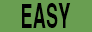
<style>
.page{position:relative;width:92px;height:32px;background:#699e51}
.page>*{position:absolute;margin:0}
.t1{font:34px "Helvetica-Bold";color:#000000;scale:0.54 1}
</style>
<div class="page">
<p class="t1" style="left:22px;top:3px;width:49px;height:25px">EASY</p>
</div>
